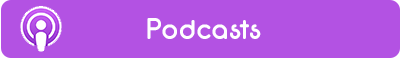
<style>
.page{position:relative;width:400px;height:60px;background:#b352e3}
.page>*{position:absolute;margin:0}
.t1{font:30px "Neon80s";color:#ffffff}
</style>
<div class="page">
<p class="t1" style="left:147px;top:18px;width:114px;height:21px">Podcasts</p>
</div>
